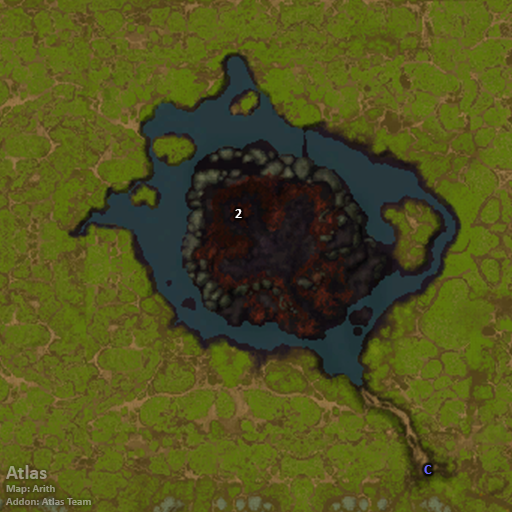
<style>
.page{position:relative;width:512px;height:512px}
.page>*{position:absolute;margin:0}
.t1{font:14px "Calibri-Bold";color:#ffffff}
.t2{font:11px "Calibri-Bold";color:#97967b}
.t3{font:20px "Calibri-Bold";color:#97967b}
.t4{font:14px "Calibri-Bold";color:#6666ff}
</style>
<div class="page">
<p class="t1" style="left:235px;top:209px;width:7px;height:9px">2</p>
<p class="t2" style="left:6px;top:465px;width:85px;height:40px"><span class="t3">Atlas<br></span>Map: Arith<br>Addon: Atlas Team</p>
<p class="t4" style="left:424px;top:465px;width:8px;height:9px">C</p>
</div>
